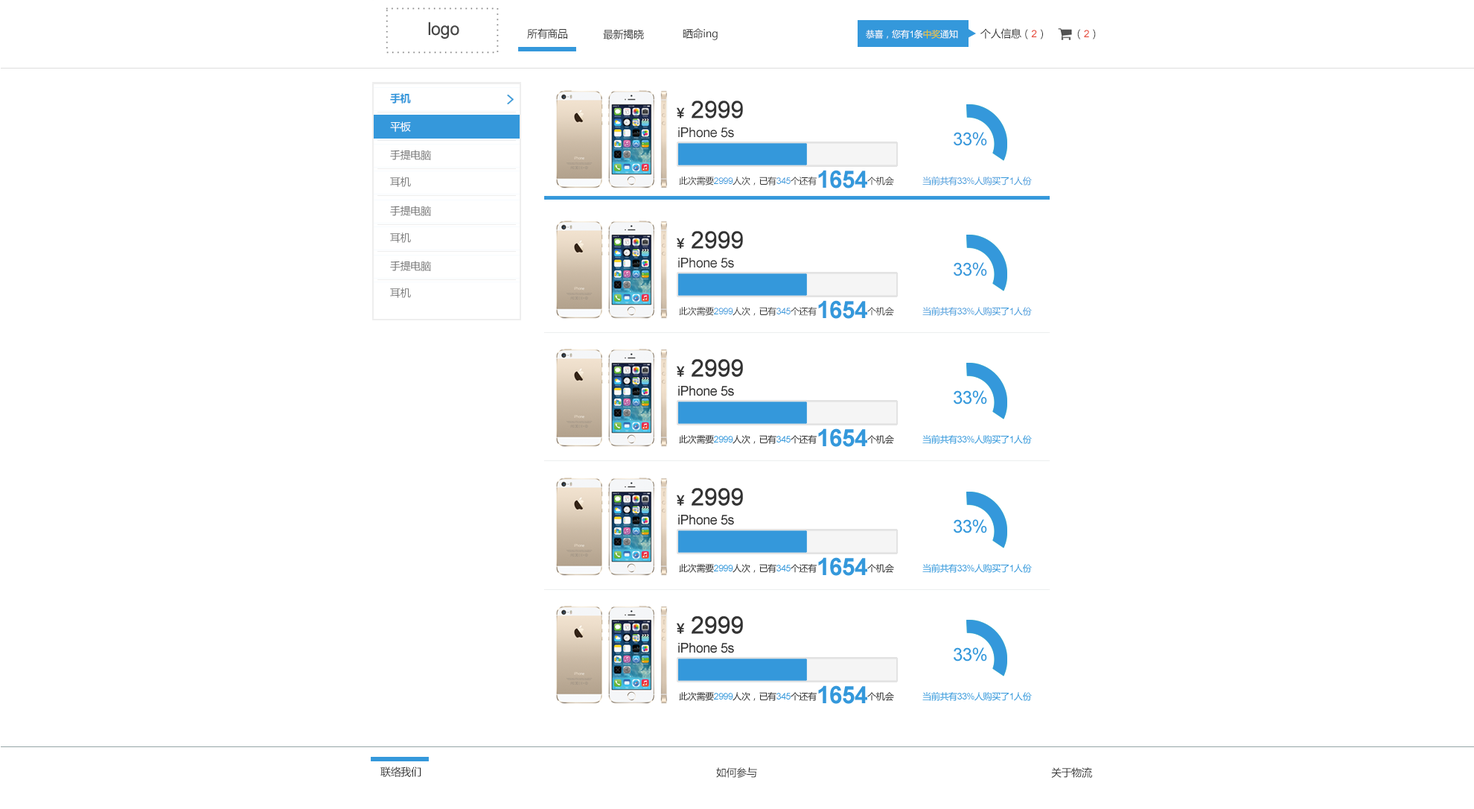
<style>
.page{position:relative;width:1474px;height:809px;background:#ffffff}
.page>*{position:absolute;margin:0}
.t1{font:10.4px "MicrosoftYaHei";letter-spacing:-0.025em;color:#333333}
.t2{font:8.9px "MicrosoftYaHei";letter-spacing:-0.025em;color:#ffffff}
.t3{font:8.9px "ArialMT";letter-spacing:-0.025em;color:#ffffff}
.t4{font:8.9px "MicrosoftYaHei";letter-spacing:-0.025em;color:#f1c619}
.t5{font:10.4px "ArialMT";letter-spacing:-0.025em;color:#e74c3c}
.t6{font:10.4px "MicrosoftYaHei-Bold";letter-spacing:-0.025em;color:#3498db}
.t7{font:23.8px "ArialMT";letter-spacing:-0.025em;color:#333333;font-weight:bold}
.t8{font:13.4px "MicrosoftYaHei";letter-spacing:-0.025em;color:#333333;font-weight:bold}
.t9{font:10.4px "MicrosoftYaHei";letter-spacing:-0.025em;color:#ffffff}
.t10{font:13.4px "ArialMT";letter-spacing:-0.025em;color:#333333}
.t11{font:17.9px "ArialMT";letter-spacing:-0.025em;color:#3498db}
.t12{font:8.9px "MicrosoftYaHei";letter-spacing:-0.025em;color:#333333}
.t13{font:8.9px "ArialMT";letter-spacing:-0.025em;color:#3498db}
.t14{font:23.8px "Arial-BoldMT";letter-spacing:-0.025em;color:#3498db}
.t15{font:8.9px "MicrosoftYaHei";letter-spacing:-0.025em;color:#3498db}
</style>
<div class="page">
<p class="t1" style="left:527px;top:28px;width:40px;height:11px">所有商品</p>
<p class="t1" style="left:603px;top:29px;width:41px;height:10px">最新揭晓</p>
<p class="t1" style="left:683px;top:28px;width:35px;height:12px">晒命ing</p>
<p class="t2" style="left:866px;top:30px;width:92px;height:9px">恭喜，您有<span class="t3">1</span>条<span class="t4">中奖</span>通知</p>
<p class="t1" style="left:981px;top:28px;width:62px;height:11px">个人信息（<span class="t5">2</span>）</p>
<p class="t1" style="left:1078px;top:29px;width:18px;height:10px">（<span class="t5">2</span>）</p>
<p class="t6" style="left:390px;top:93px;width:21px;height:11px">手机</p>
<p class="t7" style="left:677px;top:101px;width:66px;height:17px"><span class="t8">￥ </span>2999</p>
<p class="t9" style="left:390px;top:121px;width:21px;height:11px">平板</p>
<p class="t10" style="left:678px;top:127px;width:56px;height:11px">iPhone 5s</p>
<p class="t11" style="left:954px;top:132px;width:33px;height:14px">33%</p>
<p class="t12" style="left:679px;top:170px;width:215px;height:18px">此次需要<span class="t13">2999</span>人次，已有<span class="t13">345</span>个还有<span class="t14">1654</span>个机会</p>
<p class="t15" style="left:923px;top:176px;width:109px;height:9px">当前共有<span class="t13">33%</span>人购买了<span class="t13">1</span>人份</p>
<p class="t7" style="left:677px;top:231px;width:66px;height:18px"><span class="t8">￥ </span>2999</p>
<p class="t10" style="left:678px;top:258px;width:56px;height:10px">iPhone 5s</p>
<p class="t11" style="left:954px;top:262px;width:33px;height:14px">33%</p>
<p class="t12" style="left:679px;top:300px;width:215px;height:19px">此次需要<span class="t13">2999</span>人次，已有<span class="t13">345</span>个还有<span class="t14">1654</span>个机会</p>
<p class="t15" style="left:923px;top:307px;width:109px;height:9px">当前共有<span class="t13">33%</span>人购买了<span class="t13">1</span>人份</p>
<p class="t1" style="left:381px;top:766px;width:40px;height:11px">联络我们</p>
<p class="t1" style="left:716px;top:767px;width:41px;height:10px">如何参与</p>
<p class="t1" style="left:1051px;top:767px;width:41px;height:10px">关于物流</p>
</div>
